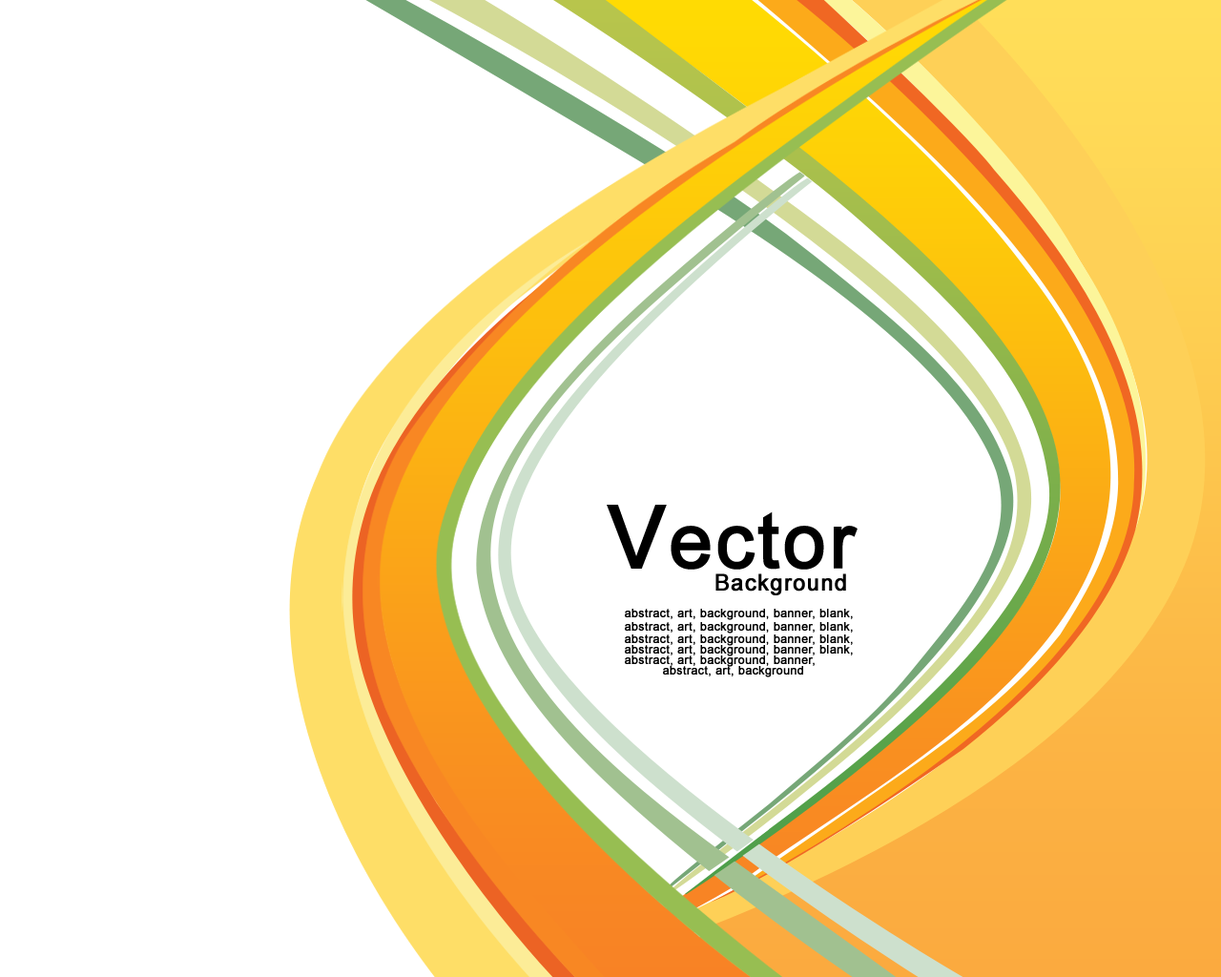
<style>
.page{position:relative;width:1221px;height:977px;background:#ffffff}
.page>*{position:absolute;margin:0}
.t1{font:76.3px "ArialMT";letter-spacing:0.025em;color:#000000;font-weight:bold}
.t2{font:85.8px "ArialMT";letter-spacing:0.025em;color:#000000;font-weight:bold}
.t3{font:22.9px "ArialMT";letter-spacing:0.025em;color:#000000;font-weight:bold}
.t4{font:11.4px "ArialMT";letter-spacing:0.025em;color:#000000;font-weight:bold}
</style>
<div class="page">
<p class="t1" style="left:607px;top:505px;width:250px;height:64px"><span class="t2">V</span>ector</p>
<p class="t3" style="left:715px;top:573px;width:131px;height:22px">Background</p>
<p class="t4" style="left:625px;top:609px;width:228px;height:11px">abstract, art, background, banner, blank,</p>
<p class="t4" style="left:625px;top:622px;width:228px;height:11px">abstract, art, background, banner, blank,</p>
<p class="t4" style="left:625px;top:634px;width:228px;height:12px">abstract, art, background, banner, blank,</p>
<p class="t4" style="left:625px;top:645px;width:228px;height:11px">abstract, art, background, banner, blank,</p>
<p class="t4" style="left:625px;top:655px;width:190px;height:12px">abstract, art, background, banner,</p>
<p class="t4" style="left:663px;top:666px;width:140px;height:11px">abstract, art, background</p>
</div>
